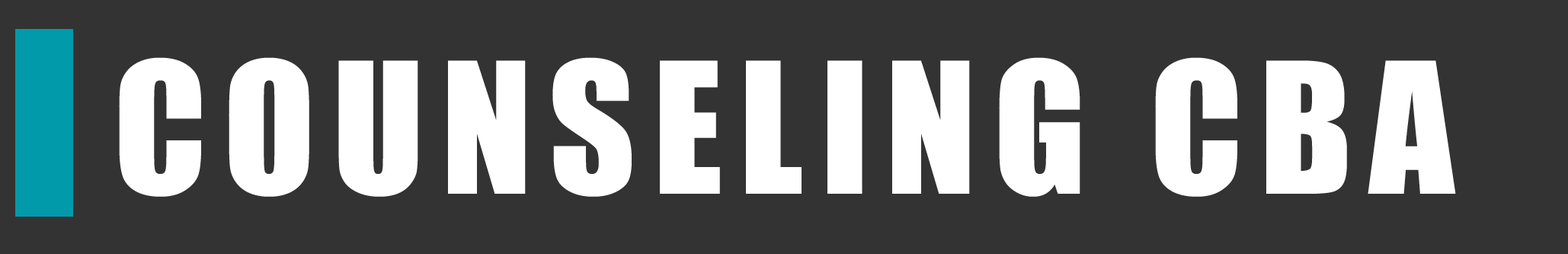
<style>
.page{position:relative;width:1568px;height:254px;background:#333333}
.page>*{position:absolute;margin:0}
.t1{font:168.3px "Impact";letter-spacing:0.1em;color:#ffffff}
</style>
<div class="page">
<p class="t1" style="left:119px;top:57px;width:1337px;height:140px">COUNSELING CBA</p>
</div>
